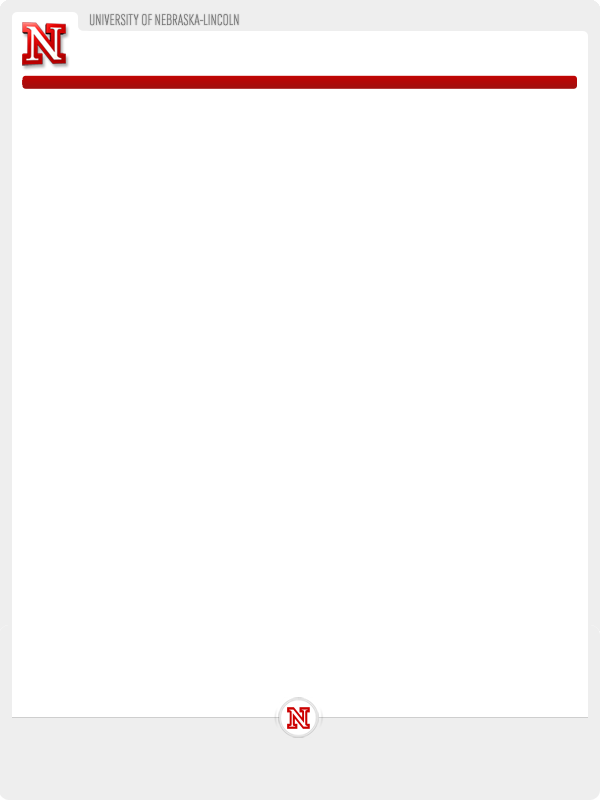
<style>
.page{position:relative;width:600px;height:800px;background:#ffffff}
.page>*{position:absolute;margin:0}
.t1{font:16.2px "URWGroteskT-LigCon";color:#6f6f6f}
</style>
<div class="page">
<p class="t1" style="left:90px;top:14px;width:149px;height:12px">UNIVERSITY OF NEBRASKA-LINCOLN</p>
</div>
